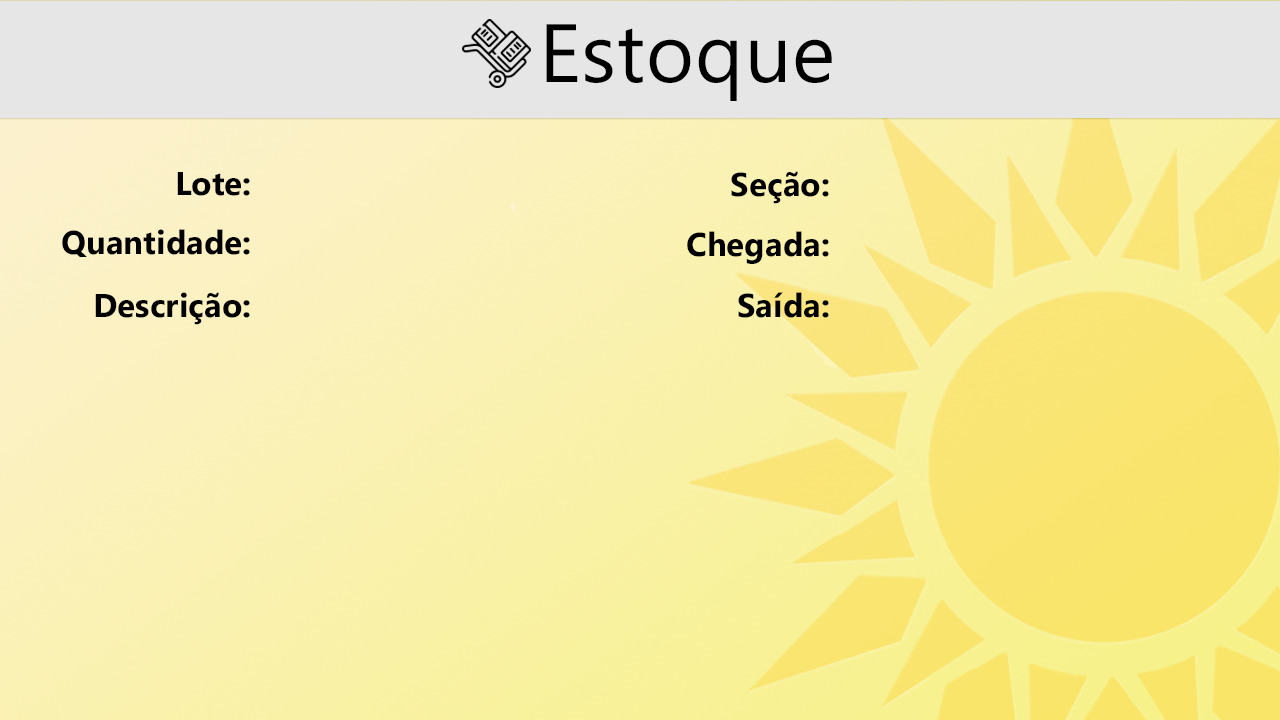
<style>
.page{position:relative;width:1280px;height:720px}
.page>*{position:absolute;margin:0}
.t1{font:82.5px "SegoeUI";letter-spacing:0.01em;color:#000000}
.t2{font:33px "SegoeUI-Bold";color:#000000}
</style>
<div class="page">
<p class="t1" style="left:546px;top:24px;width:286px;height:77px">Estoque</p>
<p class="t2" style="left:177px;top:172px;width:73px;height:24px">Lote:</p>
<p class="t2" style="left:731px;top:171px;width:98px;height:33px">Seção:</p>
<p class="t2" style="left:62px;top:229px;width:188px;height:28px">Quantidade:</p>
<p class="t2" style="left:687px;top:231px;width:142px;height:33px">Chegada:</p>
<p class="t2" style="left:95px;top:292px;width:155px;height:33px">Descrição:</p>
<p class="t2" style="left:738px;top:292px;width:91px;height:26px">Saída:</p>
</div>
